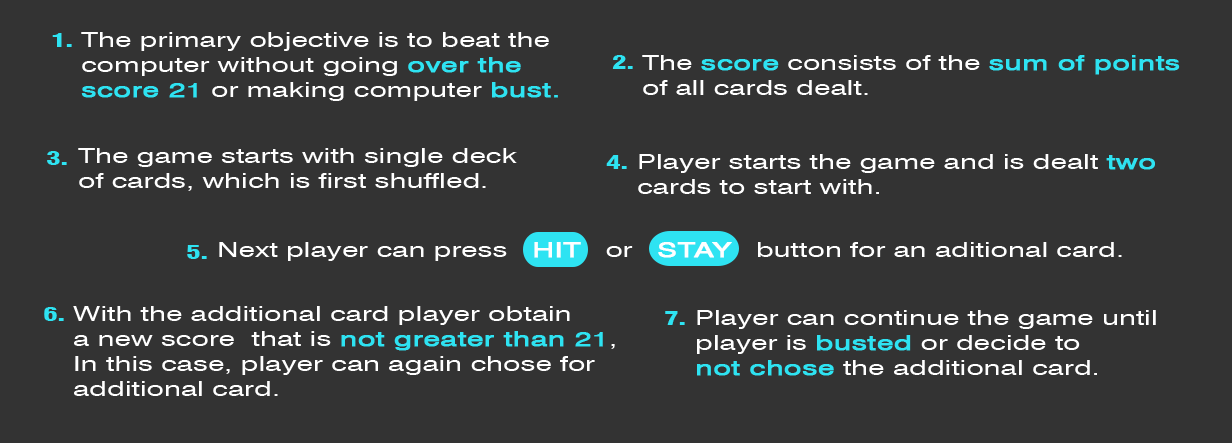
<style>
.page{position:relative;width:1232px;height:443px;background:#333333}
.page>*{position:absolute;margin:0}
.t1{font:18.8px "Swiss721BT-BlackCondensed";color:#2ee3f2;scale:1.48 1}
.t2{font:20.8px "Swiss721BT-Roman";color:#ffffff;scale:1.44 1}
.t3{font:20.8px "Swiss721BT-Roman";color:#2ee3f2;font-weight:bold;scale:1.44 1}
.t4{font:20.8px "Swiss721BT-Roman";color:#ffffff;font-weight:bold;scale:1.44 1}
</style>
<div class="page">
<p class="t1" style="left:52px;top:33px;width:20px;height:14px">1.</p>
<p class="t2" style="left:81px;top:32px;width:477px;height:69px">The primary objective is to beat the <br>computer without going <span class="t3">over the <br>score 21</span> or making computer <span class="t3">bust.</span></p>
<p class="t1" style="left:612px;top:55px;width:21px;height:14px">2.</p>
<p class="t2" style="left:642px;top:55px;width:538px;height:40px">The <span class="t3">score</span> consists of the <span class="t3">sum of points</span> <br>of all cards dealt.</p>
<p class="t2" style="left:78px;top:148px;width:439px;height:43px">The game starts with single deck <br>of cards, which is first shuffled.</p>
<p class="t1" style="left:47px;top:151px;width:20px;height:14px">3.</p>
<p class="t1" style="left:606px;top:155px;width:21px;height:14px">4.</p>
<p class="t2" style="left:638px;top:154px;width:517px;height:40px">Player starts the game and is dealt <span class="t3">two</span> <br>cards to start with.</p>
<p class="t1" style="left:187px;top:245px;width:20px;height:14px">5.</p>
<p class="t2" style="left:219px;top:242px;width:903px;height:19px">Next player can press   <span class="t4">HIT</span>   or   <span class="t4">STAY</span>   button for an aditional card.</p>
<p class="t1" style="left:44px;top:307px;width:20px;height:14px">6.</p>
<p class="t2" style="left:73px;top:306px;width:542px;height:90px">With the additional card player obtain<br>a new score  that is <span class="t3">not greater than 21</span>,<br>In this case, player can again chose for<br>additional card.</p>
<p class="t1" style="left:665px;top:311px;width:20px;height:14px">7.</p>
<p class="t2" style="left:697px;top:310px;width:459px;height:66px">Player can continue the game until <br>player is <span class="t3">busted</span> or decide to <br><span class="t3">not chose</span> the additional card.</p>
</div>
